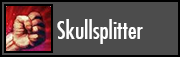
<style>
.page{position:relative;width:180px;height:57px;background:#4c4c4c}
.page>*{position:absolute;margin:0}
.t1{font:24px "FuturaCondensed";color:#ffffff}
</style>
<div class="page">
<p class="t1" style="left:57px;top:19px;width:86px;height:25px">Skullsplitter</p>
</div>
